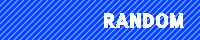
<style>
.page{position:relative;width:200px;height:40px;background:#0040ff}
.page>*{position:absolute;margin:0}
.t1{font:18px "DFGothic-SU-WINP-RKSJ-H";color:#ffffff}
</style>
<div class="page">
<p class="t1" style="left:104px;top:13px;width:80px;height:15px">RANDOM</p>
<p class="t1" style="left:104px;top:13px;width:80px;height:15px">RANDOM</p>
</div>
